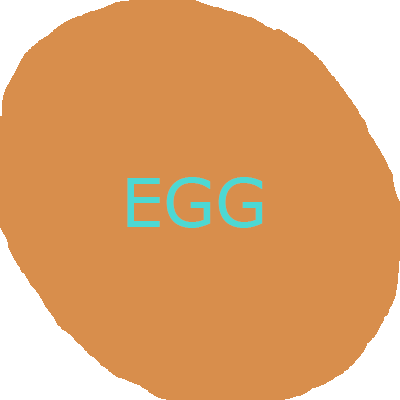
<style>
.page{position:relative;width:400px;height:400px;background:#d88e4c}
.page>*{position:absolute;margin:0}
.t1{font:66.7px "Verdana";color:#4cd8d3}
</style>
<div class="page">
<p class="t1" style="left:127px;top:177px;width:136px;height:51px">EGG</p>
</div>
